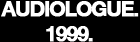
<style>
.page{position:relative;width:140px;height:42px;background:#000000}
.page>*{position:absolute;margin:0}
.t1{font:20.5px "HelveticaNeue-Bold";letter-spacing:-0.06em;color:#ffffff;font-weight:bold}
</style>
<div class="page">
<p class="t1" style="left:1px;top:1px;width:138px;height:16px">AUDIOLOGUE.</p>
<p class="t1" style="left:46px;top:26px;width:47px;height:16px">1999.</p>
</div>
